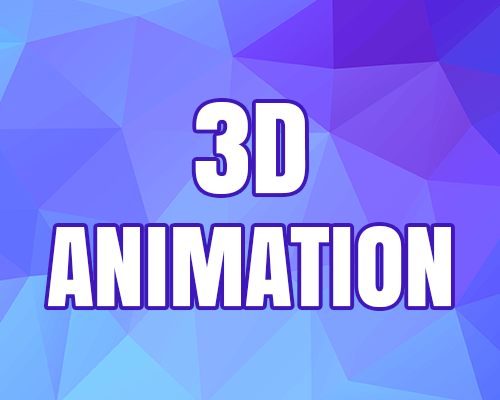
<style>
.page{position:relative;width:500px;height:400px}
.page>*{position:absolute;margin:0}
.t1{font:100.6px/112.8px "Anton";color:#ffffff}
.t2{font:115.5px/112.8px "Anton";color:#ffffff}
</style>
<div class="page">
<p class="t1" style="left:47px;top:102px;width:404px;height:205px;text-align:center"><span class="t2">3D<br></span>ANIMATION</p>
</div>
